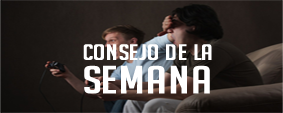
<style>
.page{position:relative;width:283px;height:113px}
.page>*{position:absolute;margin:0}
.t1{font:21.8px "BigNoodleTitling";color:#ffffff;scale:1.4 1}
.t2{font:38.3px "BigNoodleTitling";color:#ffffff;scale:1.4 1}
</style>
<div class="page">
<p class="t1" style="left:83px;top:44px;width:129px;height:16px">Consejo de la</p>
<p class="t2" style="left:84px;top:65px;width:126px;height:29px">semana</p>
</div>
